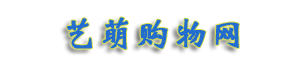
<style>
.page{position:relative;width:294px;height:70px;background:#ffffff}
.page>*{position:absolute;margin:0}
.t1{font:36px "STXinwei";color:#236dd0;font-weight:bold}
</style>
<div class="page">
<p class="t1" style="left:67px;top:17px;width:172px;height:33px">艺萌购物网</p>
</div>
